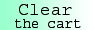
<style>
.page{position:relative;width:100px;height:30px}
.page>*{position:absolute;margin:0}
.t1{font:18px "Courier";color:#000000}
.t2{font:14px "Courier";color:#000000}
</style>
<div class="page">
<p class="t1" style="left:19px;top:4px;width:53px;height:11px">Clear</p>
<p class="t2" style="left:15px;top:19px;width:66px;height:9px">the cart</p>
</div>
